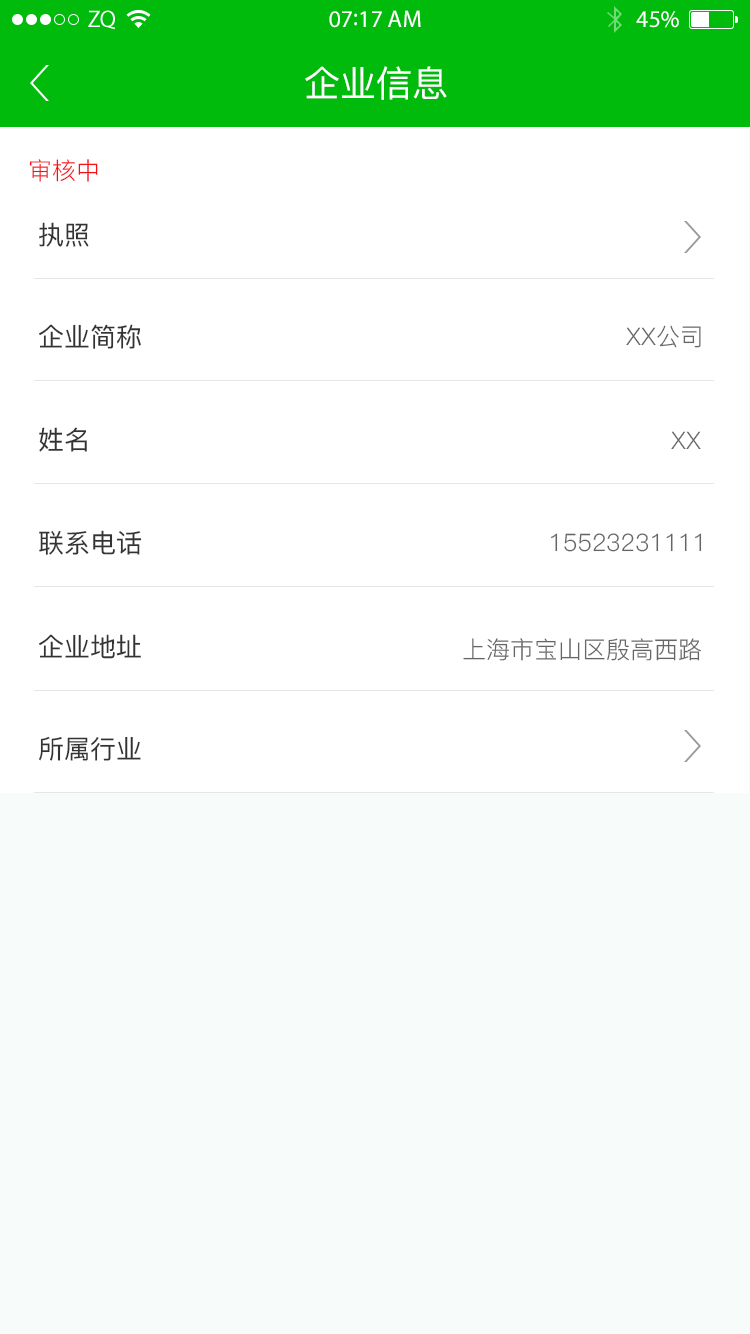
<style>
.page{position:relative;width:750px;height:1334px;background:#ffffff}
.page>*{position:absolute;margin:0}
.t1{font:24px "MyriadPro-Regular";color:#ffffff}
.t2{font:36px "PingFang-SC-Medium";color:#ffffff}
.t3{font:24px "PingFang-SC-Regular";color:#f61016}
.t4{font:26px "PingFang-SC-Medium";color:#333333}
.t5{font:24px "PingFang-SC-Regular";color:#666666}
</style>
<div class="page">
<p class="t1" style="left:329px;top:10px;width:92px;height:18px">07:17 AM</p>
<p class="t1" style="left:636px;top:11px;width:43px;height:17px">45%</p>
<p class="t2" style="left:305px;top:66px;width:142px;height:34px">企业信息</p>
<p class="t3" style="left:29px;top:159px;width:69px;height:23px">审核中</p>
<p class="t4" style="left:39px;top:222px;width:50px;height:25px">执照</p>
<p class="t4" style="left:39px;top:324px;width:102px;height:25px">企业简称</p>
<p class="t5" style="left:626px;top:325px;width:75px;height:23px">XX公司</p>
<p class="t4" style="left:39px;top:427px;width:48px;height:25px">姓名</p>
<p class="t5" style="left:671px;top:431px;width:30px;height:19px">XX</p>
<p class="t4" style="left:39px;top:530px;width:103px;height:25px">联系电话</p>
<p class="t5" style="left:551px;top:533px;width:151px;height:19px">15523231111</p>
<p class="t4" style="left:39px;top:634px;width:102px;height:25px">企业地址</p>
<p class="t5" style="left:463px;top:638px;width:238px;height:23px">上海市宝山区殷高西路</p>
<p class="t4" style="left:39px;top:736px;width:102px;height:25px">所属行业</p>
</div>
